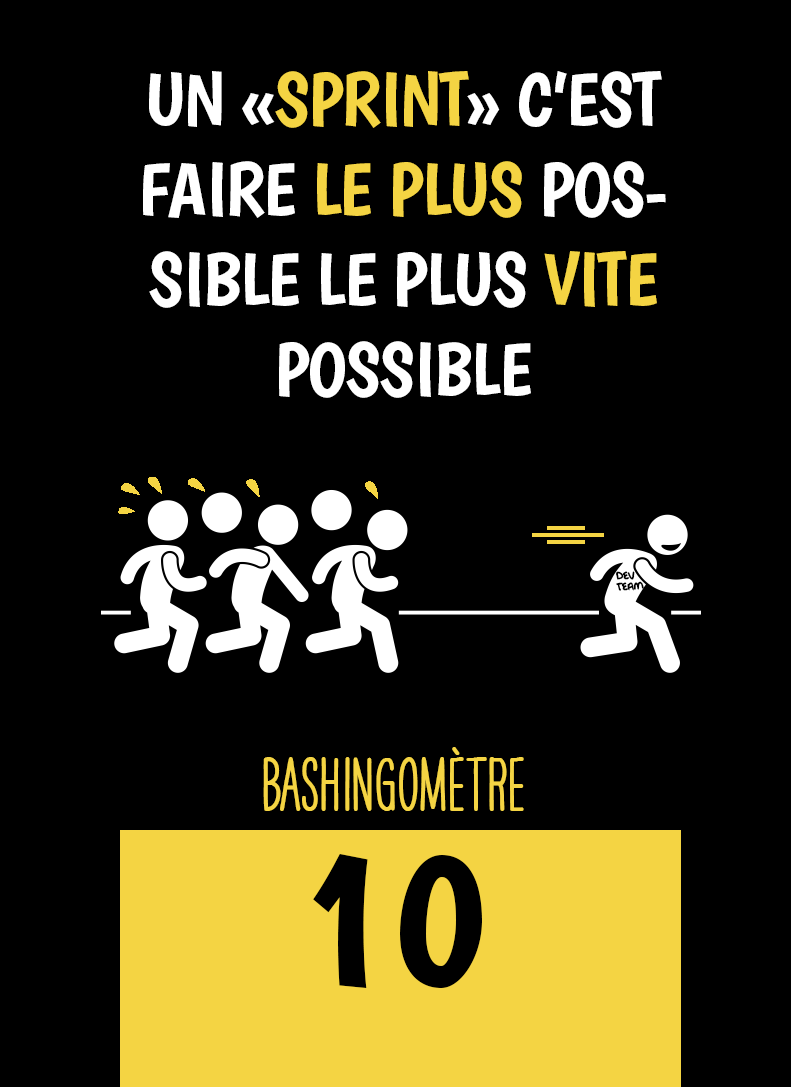
<style>
.page{position:relative;width:791px;height:1087px;background:#000000}
.page>*{position:absolute;margin:0}
.t1{font:75px "Boogaloo-Regular";letter-spacing:-0.02em;color:#ffffff}
.t2{font:75px "Boogaloo-Regular";letter-spacing:-0.02em;color:#f4d443}
.t3{font:12.5px/10.8px "OakStreetW01-Regular";letter-spacing:-0.02em;color:#000000}
.t4{font:66.7px "HAVEANICEDAYTallW04-Bold";color:#f4d443}
.t5{font:200px "Boogaloo-Regular";color:#000000}
</style>
<div class="page">
<p class="t1" style="left:143px;top:71px;width:523px;height:327px;text-align:center">UN «<span class="t2">SPRINT</span>» C’EST FAIRE <span class="t2">LE PLUS </span>POSSIBLE LE PLUS <span class="t2">VITE </span>POSSIBLE</p>
<p class="t3" style="left:616px;top:571px;width:28px;height:20px;rotate:-2deg">DEV<br>TEAM</p>
<p class="t4" style="left:263px;top:747px;width:261px;height:64px">BASHINgomètre</p>
<p class="t5" style="left:313px;top:854px;width:169px;height:134px">10</p>
</div>
